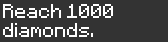
<style>
.page{position:relative;width:168px;height:42px;background:#333333}
.page>*{position:absolute;margin:0}
.t1{font:16px "Minecraftia-Regular";color:#ffffff}
</style>
<div class="page">
<p class="t1" style="left:3px;top:4px;width:110px;height:33px">Reach 1000<br>diamonds.</p>
</div>
